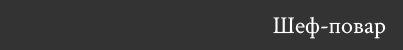
<style>
.page{position:relative;width:403px;height:50px;background:#333333}
.page>*{position:absolute;margin:0}
.t1{font:24px "CrimsonText-Regular";color:#ffffff}
</style>
<div class="page">
<p class="t1" style="left:273px;top:16px;width:113px;height:23px">Шеф-повар</p>
</div>
